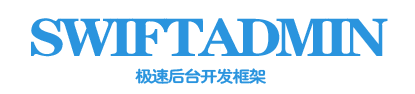
<style>
.page{position:relative;width:415px;height:94px;background:#ffffff}
.page>*{position:absolute;margin:0}
.t1{font:54px "FZCHYFW--GB1-0";letter-spacing:-0.1em;color:#2a94de;scale:1.11 1}
.t2{font:16.2px "HYe4gj";letter-spacing:-0.1em;color:#2a94de;scale:1.11 1}
</style>
<div class="page">
<p class="t1" style="left:31px;top:18px;width:357px;height:39px">SWIFTADMIN</p>
<p class="t2" style="left:135px;top:68px;width:131px;height:16px">极速后台开发框架</p>
</div>
